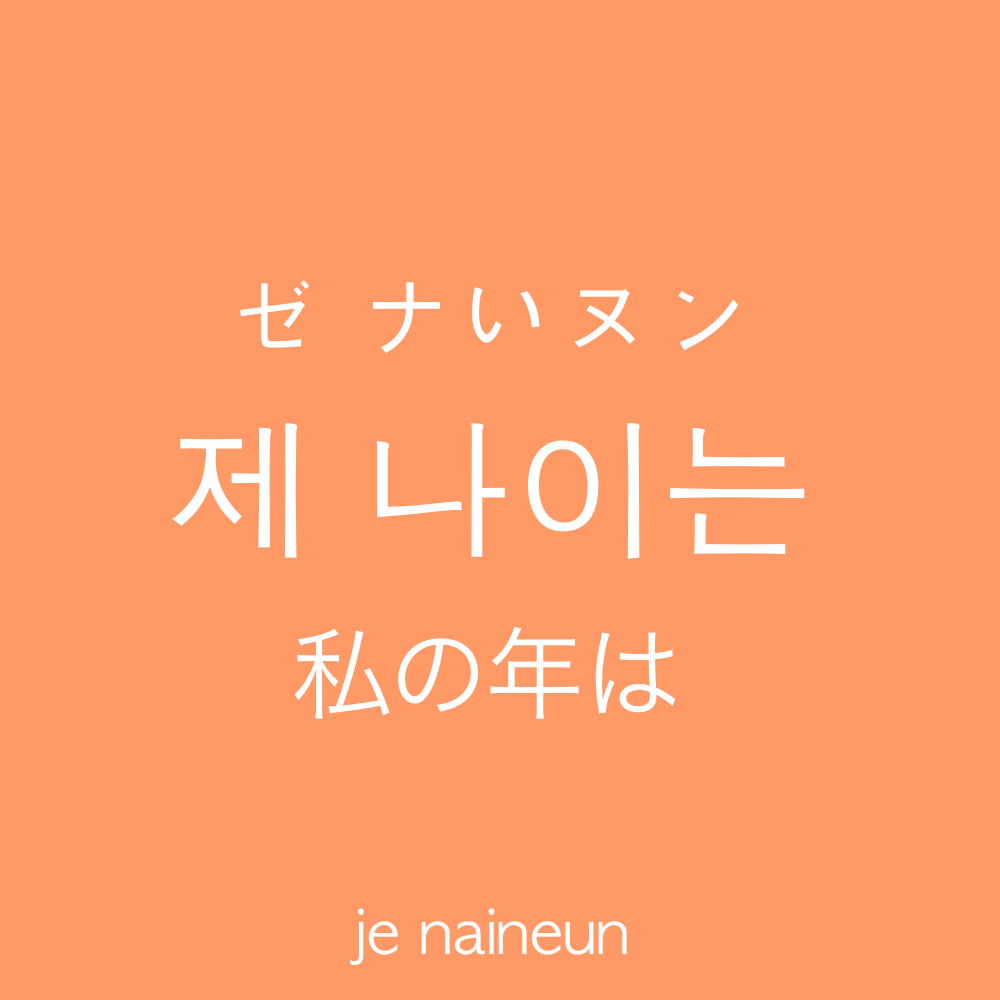
<style>
.page{position:relative;width:1000px;height:1000px;background:#ff9966}
.page>*{position:absolute;margin:0}
.t1{font:100px "AppleGothic";color:#ffffff}
.t2{font:150px "AppleGothic";color:#ffffff}
.t3{font:100px "HiraKakuProN-W3";color:#ffffff}
.t4{font:60px "AppleGothic";color:#ffffff}
</style>
<div class="page">
<p class="t1" style="left:240px;top:280px;width:498px;height:73px">ゼ ナいヌン</p>
<p class="t2" style="left:172px;top:423px;width:633px;height:136px">제 나이는</p>
<p class="t3" style="left:294px;top:626px;width:382px;height:93px">私の年は</p>
<p class="t4" style="left:350px;top:908px;width:277px;height:58px">je naineun</p>
</div>
